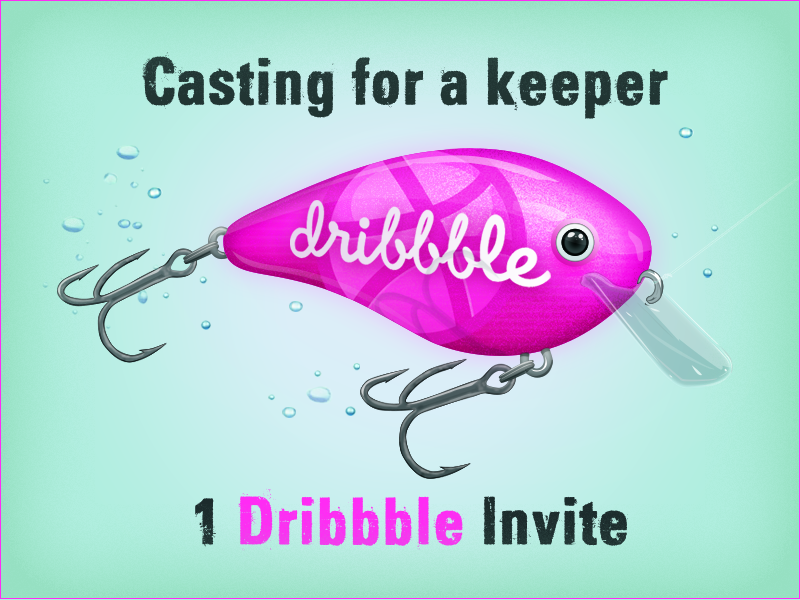
<style>
.page{position:relative;width:800px;height:600px}
.page>*{position:absolute;margin:0}
.t1{font:64.1px "DubTone";letter-spacing:0.003em;color:#213533}
.t2{font:64.8px "DubTone";letter-spacing:0.003em;color:#ff2bf4}
.t3{font:59.5px "DubTone";letter-spacing:0.003em;color:#3c4e51}
.t4{font:64.8px "DubTone";letter-spacing:0.003em;color:#1c2b2c}
</style>
<div class="page">
<p class="t1" style="left:142px;top:52px;width:526px;height:67px">Casting for a keeper</p>
<p class="t2" style="left:195px;top:488px;width:433px;height:63px"><span class="t3"><br></span><span class="t4">1</span> Dribbble <span class="t4">Invite</span></p>
</div>
